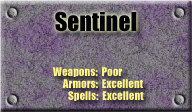
<style>
.page{position:relative;width:192px;height:112px}
.page>*{position:absolute;margin:0}
.t1{font:24px "Impact";color:#000000}
.t2{font:11px "Impact";color:#fff587}
</style>
<div class="page">
<p class="t1" style="left:55px;top:11px;width:82px;height:21px">Sentinel</p>
<p class="t2" style="left:53px;top:67px;width:69px;height:10px">Weapons:  Poor</p>
<p class="t2" style="left:62px;top:79px;width:81px;height:9px">Armors:  Excellent</p>
<p class="t2" style="left:68px;top:91px;width:76px;height:10px">Spells:  Excellent</p>
</div>
